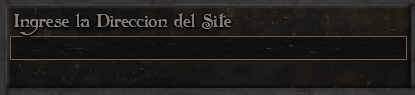
<style>
.page{position:relative;width:415px;height:95px}
.page>*{position:absolute;margin:0}
.t1{font:18.1px "Folkard";color:#88837e}
</style>
<div class="page">
<p class="t1" style="left:14px;top:13px;width:218px;height:22px">Ingrese la Direccion del Site</p>
</div>
